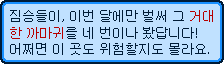
<style>
.page{position:relative;width:224px;height:64px;background:#c0e1ff}
.page>*{position:absolute;margin:0}
.t1{font:12.5px "Gulim";color:#001c37}
.t2{font:12.5px "Gulim";color:#b60000}
</style>
<div class="page">
<p class="t1" style="left:10px;top:10px;width:203px;height:12px">짐승들이, 이번 달에만 벌써 그 <span class="t2">거대</span></p>
<p class="t1" style="left:10px;top:27px;width:187px;height:12px"><span class="t2">한 까마귀</span>를 네 번이나 봤답니다!</p>
<p class="t1" style="left:10px;top:43px;width:199px;height:12px">어쩌면 이 곳도 위험할지도 몰라요.</p>
</div>
